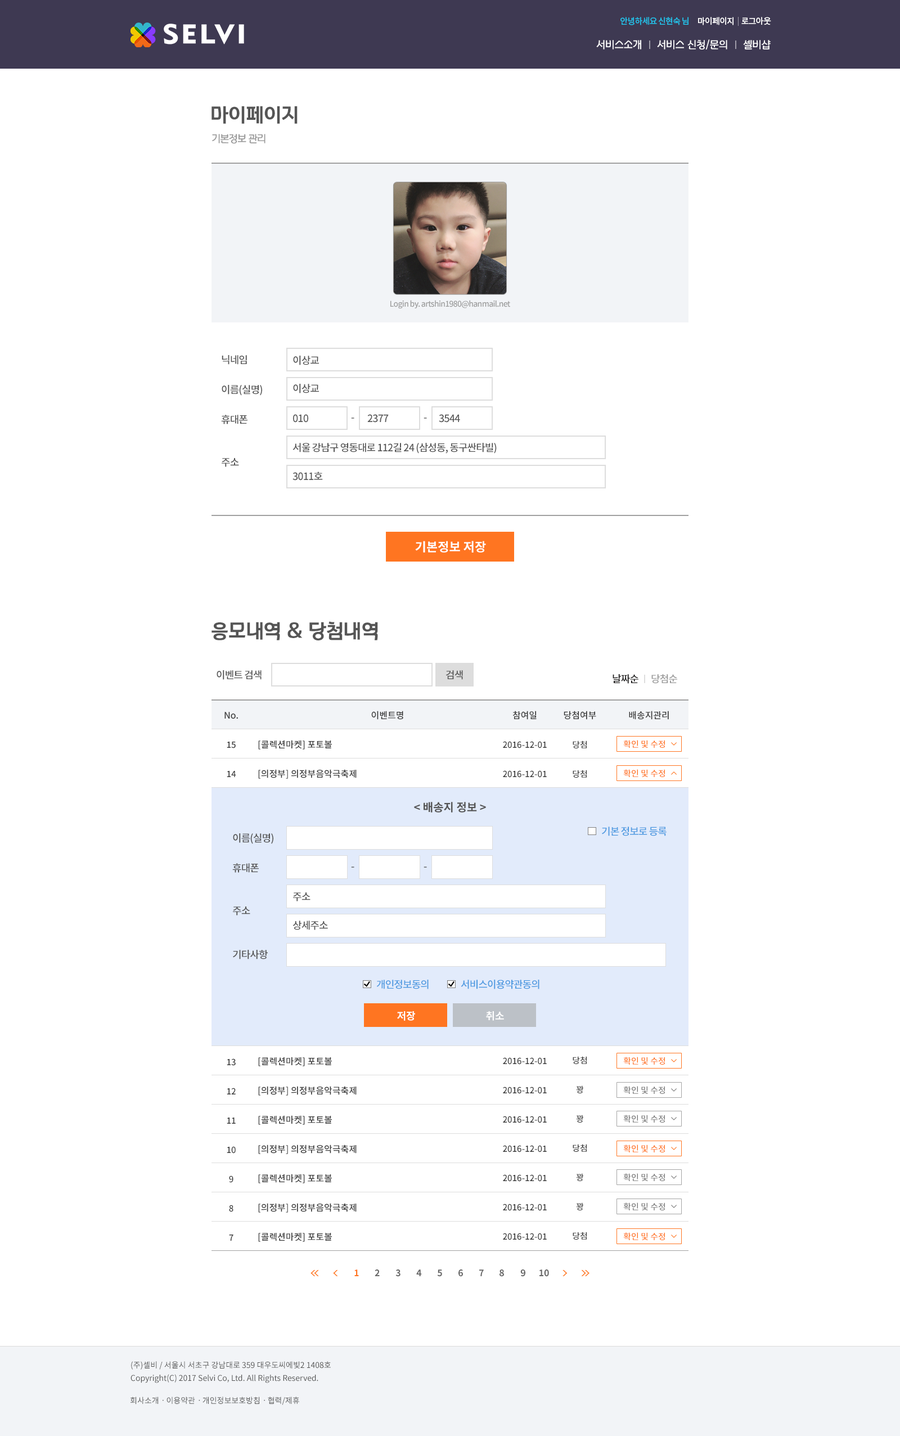
<style>
.page{position:relative;width:900px;height:1436px;background:#ffffff}
.page>*{position:absolute;margin:0}
.t1{font:8.4px "NotoSansCJKkr-Medium";letter-spacing:-0.05em;color:#21c0e8}
.t2{font:8.4px "NotoSansCJKkr-Medium";letter-spacing:-0.05em;color:#ffffff}
.t3{font:10.1px "KHNPHDotfR";color:#ffffff}
.t4{font:19.5px "KHNPHDotfB";color:#555555}
.t5{font:10.1px "KHNPHDotfR";letter-spacing:-0.05em;color:#999999}
.t6{font:7.9px "NotoSansCJKkr-Medium";letter-spacing:-0.05em;color:#999999}
.t7{font:10.1px/29.7px "NotoSansCJKkr-Medium";letter-spacing:-0.05em;color:#555555}
.t8{font:10.1px/42.7px "NotoSansCJKkr-Medium";letter-spacing:-0.05em;color:#555555}
.t9{font:10.1px "NotoSansCJKkr-Medium";letter-spacing:-0.05em;color:#555555}
.t10{font:10.1px "NotoSansCJKkr-Medium";letter-spacing:-0.05em}
.t11{font:12.4px "NotoSansCJKkr-Bold";color:#ffffff}
.t12{font:10.1px "NotoSansCJKkr-Medium";letter-spacing:-0.05em;color:#1e1d1d}
.t13{font:10.1px "NotoSansCJKkr-Medium";letter-spacing:-0.05em;color:#999999}
.t14{font:8.4px/29.2px "NotoSansCJKkr-Medium";color:#353535}
.t15{font:9px/29.2px "NotoSansCJKkr-Medium";color:#353535}
.t16{font:8.4px/24.8px "NotoSansCJKkr-Medium";color:#353535}
.t17{font:9px "NotoSansCJKkr-Medium";color:#353535}
.t18{font:8.4px/23.6px "NotoSansCJKkr-Medium";color:#353535}
.t19{font:8.4px/23.1px "NotoSansCJKkr-Medium";color:#353535}
.t20{font:9px/24.2px "NotoSansCJKkr-Medium";color:#353535}
.t21{font:8.4px "NotoSansCJKkr-Medium";color:#ff7521}
.t22{font:11.2px "NotoSansCJKkr-Bold";color:#555555}
.t23{font:10.1px/43.8px "NotoSansCJKkr-Medium";letter-spacing:-0.05em;color:#555555}
.t24{font:10.1px "NotoSansCJKkr-Medium";letter-spacing:-0.05em;color:#4e9ae1}
.t25{font:10.1px "NotoSansCJKkr-Bold";color:#ffffff}
.t26{font:8.4px "NotoSansCJKkr-Medium";color:#797979}
.t27{font:9px "NotoSansCJKkr-Bold";color:#ff7521}
.t28{font:9px "NotoSansCJKkr-Bold";color:#676767}
.t29{font:7.9px/12.9px "NotoSansCJKkr-Regular";color:#515151}
.t30{font:7.9px "NotoSansCJKkr-Regular";color:#515151}
</style>
<div class="page">
<p class="t1" style="left:620px;top:17px;width:68px;height:8px">안녕하세요 신현숙 님</p>
<p class="t2" style="left:698px;top:17px;width:36px;height:8px">마이페이지</p>
<p class="t2" style="left:741px;top:17px;width:30px;height:8px">로그아웃</p>
<p class="t3" style="left:596px;top:39px;width:175px;height:11px">서비스소개     서비스 신청/문의     셀비샵</p>
<p class="t4" style="left:212px;top:106px;width:86px;height:18px">마이페이지</p>
<p class="t5" style="left:212px;top:134px;width:54px;height:10px">기본정보 관리</p>
<p class="t6" style="left:390px;top:300px;width:120px;height:9px">Login by. artshin1980@hanmail.net</p>
<p class="t7" style="left:221px;top:355px;width:41px;height:112px">닉네임<br>이름(실명)<br>휴대폰<br><span class="t8">주소</span></p>
<p class="t9" style="left:293px;top:356px;width:26px;height:9px">이상교</p>
<p class="t9" style="left:293px;top:384px;width:26px;height:9px">이상교</p>
<p class="t9" style="left:293px;top:414px;width:15px;height:8px">010</p>
<p class="t9" style="left:367px;top:414px;width:22px;height:8px">2377</p>
<p class="t9" style="left:439px;top:414px;width:21px;height:8px">3544</p>
<p class="t10" style="left:351px;top:417px;width:3px;height:1px">-</p>
<p class="t10" style="left:424px;top:417px;width:3px;height:1px">-</p>
<p class="t9" style="left:292px;top:443px;width:205px;height:10px">서울 강남구 영동대로 112길 24 (삼성동, 동구싼타빌)</p>
<p class="t9" style="left:292px;top:471px;width:31px;height:9px">3011호</p>
<p class="t11" style="left:415px;top:541px;width:71px;height:11px">기본정보 저장</p>
<p class="t4" style="left:212px;top:621px;width:166px;height:20px">응모내역 &amp; 당첨내역</p>
<p class="t9" style="left:217px;top:670px;width:45px;height:10px">이벤트 검색</p>
<p class="t9" style="left:446px;top:670px;width:17px;height:10px">검색</p>
<p class="t12" style="left:613px;top:674px;width:64px;height:9px">날짜순       <span class="t13">당첨순</span></p>
<p class="t14" style="left:224px;top:712px;width:14px;height:528px;text-align:center"><span class="t15">No.<br></span>15<br>14<br><br><br><br><br><br><br><br><br><br><span class="t16">13<br></span>12<br>11<br>10<br>9<br>8<br>7</p>
<p class="t17" style="left:371px;top:710px;width:32px;height:9px">이벤트명</p>
<p class="t14" style="left:503px;top:710px;width:44px;height:530px;text-align:center"><span class="t15">참여일<br></span>2016-12-01<br>2016-12-01<br><br><br><br><br><br><br><br><br><br><span class="t18">2016-12-01<br></span>2016-12-01<br>2016-12-01<br>2016-12-01<br>2016-12-01<br>2016-12-01<br>2016-12-01</p>
<p class="t14" style="left:564px;top:710px;width:32px;height:529px;text-align:center"><span class="t15">당첨여부<br></span>당첨<br>당첨<br><br><br><br><br><br><br><br><br><br><span class="t19">당첨<br></span>꽝<br>꽝<br>당첨<br>꽝<br>꽝<br>당첨</p>
<p class="t17" style="left:629px;top:710px;width:40px;height:9px">배송지관리</p>
<p class="t15" style="left:258px;top:740px;width:99px;height:501px">[콜렉션마켓] 포토볼<br>[의정부] 의정부음악극축제<br><br><br><br><br><br><br><br><br><br><span class="t20">[콜렉션마켓] 포토볼<br></span>[의정부] 의정부음악극축제<br>[콜렉션마켓] 포토볼<br>[의정부] 의정부음악극축제<br>[콜렉션마켓] 포토볼<br>[의정부] 의정부음악극축제<br>[콜렉션마켓] 포토볼</p>
<p class="t21" style="left:623px;top:740px;width:42px;height:8px">확인 및 수정</p>
<p class="t21" style="left:623px;top:769px;width:42px;height:8px">확인 및 수정</p>
<p class="t22" style="left:414px;top:802px;width:72px;height:10px">&lt; 배송지 정보 &gt;</p>
<p class="t7" style="left:232px;top:833px;width:41px;height:126px">이름(실명)<br>휴대폰<br><span class="t8">주소<br></span><span class="t23">기타사항</span></p>
<p class="t24" style="left:602px;top:826px;width:65px;height:10px">기본 정보로 등록</p>
<p class="t10" style="left:351px;top:866px;width:3px;height:1px">-</p>
<p class="t10" style="left:424px;top:866px;width:3px;height:1px">-</p>
<p class="t9" style="left:293px;top:892px;width:17px;height:9px">주소</p>
<p class="t9" style="left:292px;top:920px;width:36px;height:10px">상세주소</p>
<p class="t24" style="left:376px;top:979px;width:53px;height:10px">개인정보동의</p>
<p class="t24" style="left:461px;top:979px;width:78px;height:10px">서비스이용약관동의</p>
<p class="t25" style="left:397px;top:1011px;width:18px;height:9px">저장</p>
<p class="t25" style="left:486px;top:1011px;width:18px;height:9px">취소</p>
<p class="t21" style="left:623px;top:1056px;width:42px;height:8px">확인 및 수정</p>
<p class="t26" style="left:623px;top:1086px;width:42px;height:8px">확인 및 수정</p>
<p class="t26" style="left:623px;top:1114px;width:42px;height:8px">확인 및 수정</p>
<p class="t21" style="left:623px;top:1144px;width:42px;height:8px">확인 및 수정</p>
<p class="t26" style="left:623px;top:1173px;width:42px;height:8px">확인 및 수정</p>
<p class="t26" style="left:623px;top:1202px;width:42px;height:8px">확인 및 수정</p>
<p class="t21" style="left:623px;top:1232px;width:42px;height:8px">확인 및 수정</p>
<p class="t27" style="left:354px;top:1269px;width:5px;height:7px">1</p>
<p class="t28" style="left:375px;top:1269px;width:5px;height:7px">2</p>
<p class="t28" style="left:395px;top:1269px;width:5px;height:7px">3</p>
<p class="t28" style="left:416px;top:1269px;width:6px;height:7px">4</p>
<p class="t28" style="left:437px;top:1269px;width:5px;height:7px">5</p>
<p class="t28" style="left:458px;top:1269px;width:5px;height:7px">6</p>
<p class="t28" style="left:479px;top:1269px;width:5px;height:7px">7</p>
<p class="t28" style="left:500px;top:1269px;width:4px;height:7px">8</p>
<p class="t28" style="left:520px;top:1269px;width:5px;height:7px">9</p>
<p class="t28" style="left:539px;top:1269px;width:10px;height:7px">10</p>
<p class="t29" style="left:130px;top:1361px;width:201px;height:22px">(주)셀비 / 서울시 서초구 강남대로 359 대우도씨에빛2 1408호<br>Copyright(C) 2017 Selvi Co, Ltd. All Rights Reserved.</p>
<p class="t30" style="left:130px;top:1396px;width:169px;height:9px">회사소개ㆍ이용약관ㆍ개인정보보호방침ㆍ협력/제휴</p>
</div>
